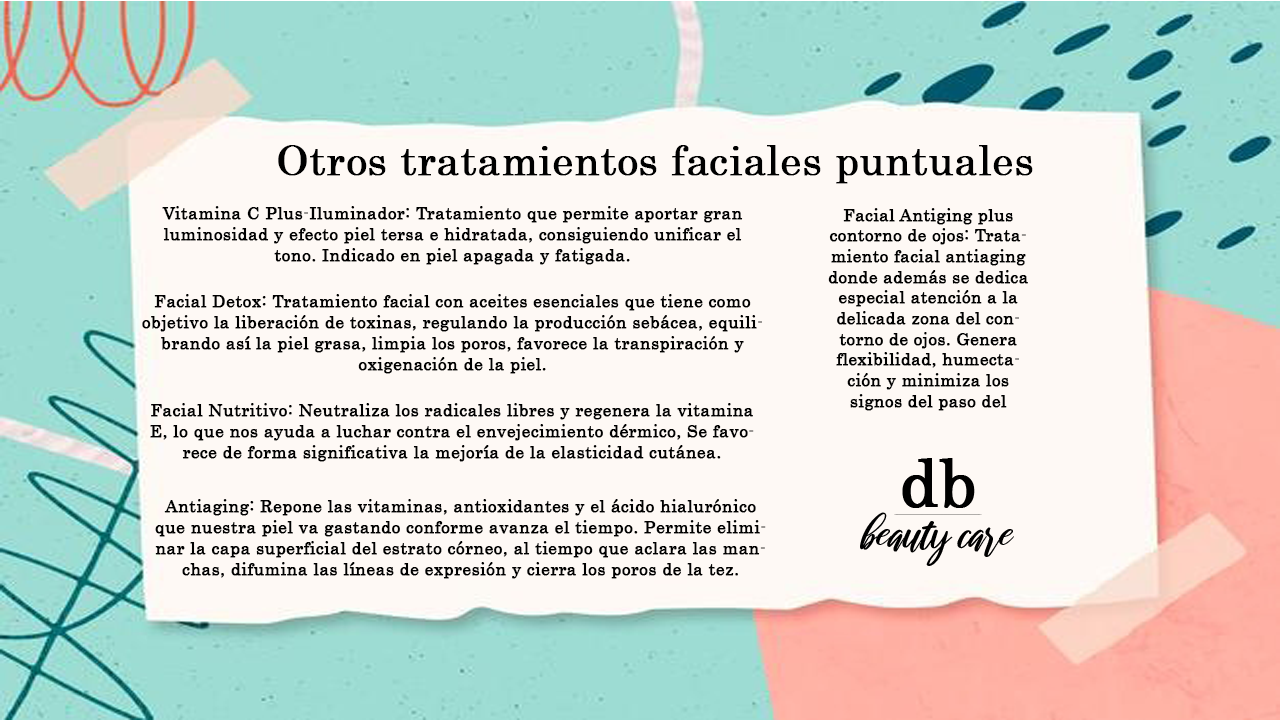
<style>
.page{position:relative;width:1280px;height:720px;background:#fef9f5}
.page>*{position:absolute;margin:0}
.t1{font:40.9px "Century";color:#000000;font-weight:bold}
.t2{font:17.5px "Century";color:#000000;font-weight:bold}
.t3{font:17.2px "Century";color:#000000;font-weight:bold}
</style>
<div class="page">
<p class="t1" style="left:278px;top:145px;width:755px;height:39px">Otros tratamientos faciales puntuales</p>
<p class="t2" style="left:162px;top:206px;width:581px;height:59px;text-align:center">Vitamina C Plus-Iluminador: Tratamiento que permite aportar gran luminosidad y efecto piel tersa e hidratada, consiguiendo unificar el tono. Indicado en piel apagada y fatigada.</p>
<p class="t3" style="left:828px;top:208px;width:200px;height:203px;text-align:center">Facial Antiging plus contorno de ojos: Tratamiento facial antiaging donde además se dedica especial atención a la delicada zona del contorno de ojos. Genera flexibilidad, humectación y minimiza los signos del paso del tiempo.Ideal como aporte de nutrición extra para todo tipo de piel.</p>
<p class="t2" style="left:142px;top:294px;width:620px;height:80px;text-align:center">Facial Detox: Tratamiento facial con aceites esenciales que tiene como objetivo la liberación de toxinas, regulando la producción sebácea, equilibrando así la piel grasa, limpia los poros, favorece la transpiración y oxigenación de la piel.</p>
<p class="t2" style="left:150px;top:403px;width:604px;height:59px;text-align:center">Facial Nutritivo: Neutraliza los radicales libres y regenera la vitamina E, lo que nos ayuda a luchar contra el envejecimiento dérmico, Se favorece de forma significativa la mejoría de la elasticidad cutánea.</p>
<p class="t2" style="left:155px;top:499px;width:611px;height:80px;text-align:center">Antiaging: Repone las vitaminas, antioxidantes y el ácido hialurónico que nuestra piel va gastando conforme avanza el tiempo. Permite eliminar la capa superficial del estrato córneo, al tiempo que aclara las manchas, difumina las líneas de expresión y cierra los poros de la tez.</p>
</div>
